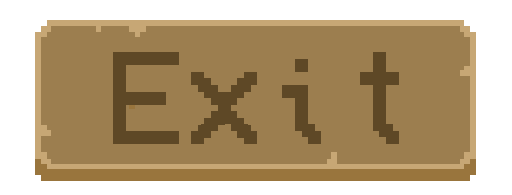
<style>
.page{position:relative;width:512px;height:195px;background:#9c7e4f}
.page>*{position:absolute;margin:0}
.t1{font:134.9px "VCROSDMono";letter-spacing:-0.01em;color:#5e4826}
</style>
<div class="page">
<p class="t1" style="left:113px;top:52px;width:286px;height:92px">Exit</p>
</div>
